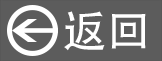
<style>
.page{position:relative;width:162px;height:61px;background:#5c5c5c}
.page>*{position:absolute;margin:0}
.t1{font:44.2px "AdobeHeitiStd-Regular";color:#ffffff}
</style>
<div class="page">
<p class="t1" style="left:64px;top:11px;width:82px;height:40px">返回</p>
</div>
